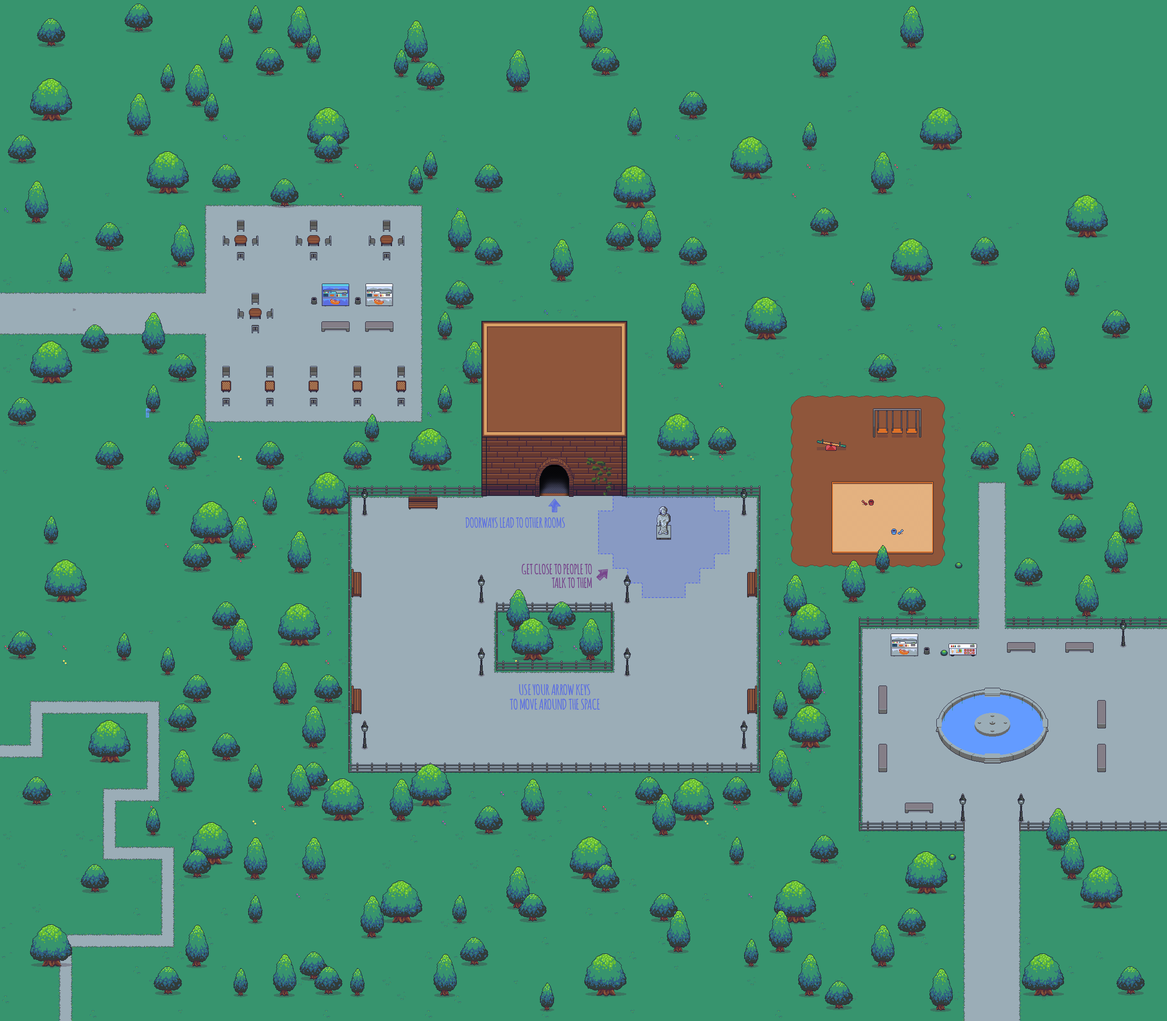
<style>
.page{position:relative;width:1167px;height:1021px;background:#37946e}
.page>*{position:absolute;margin:0}
.t1{font:13.7px "Amatic-Bold";color:#5b6ee1}
.t2{font:13.7px/13.7px "Amatic-Bold";color:#76428a}
.t3{font:14.6px/14.6px "Amatic-Bold";color:#5b6ee1}
</style>
<div class="page">
<p class="t1" style="left:466px;top:518px;width:99px;height:10px">DOORWAYS LEAD TO OTHER ROOMS</p>
<p class="t2" style="left:522px;top:564px;width:70px;height:24px;text-align:right">GET CLOSE TO PEOPLE TO<br>TALK TO THEM</p>
<p class="t3" style="left:510px;top:684px;width:90px;height:26px;text-align:center">USE YOUR ARROW KEYS<br>TO MOVE AROUND THE SPACE</p>
</div>
